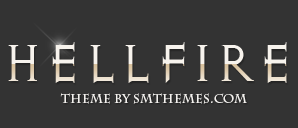
<style>
.page{position:relative;width:298px;height:128px;background:#333333}
.page>*{position:absolute;margin:0}
.t1{font:60px "DiabloLight";text-transform:uppercase}
.t2{font:12px "CharlemagneStd-Bold";color:#f3f1ee}
</style>
<div class="page">
<p class="t1" style="left:8px;top:42px;width:279px;height:41px">HellFire</p>
<p class="t2" style="left:60px;top:93px;width:187px;height:11px">Theme by SMThemes.com</p>
</div>
